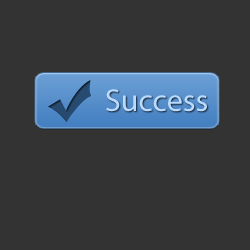
<style>
.page{position:relative;width:250px;height:250px;background:#333333}
.page>*{position:absolute;margin:0}
.t1{font:32px "MyriadPro-Regular";color:#b9dbff}
</style>
<div class="page">
<p class="t1" style="left:106px;top:89px;width:101px;height:23px">Success</p>
</div>
